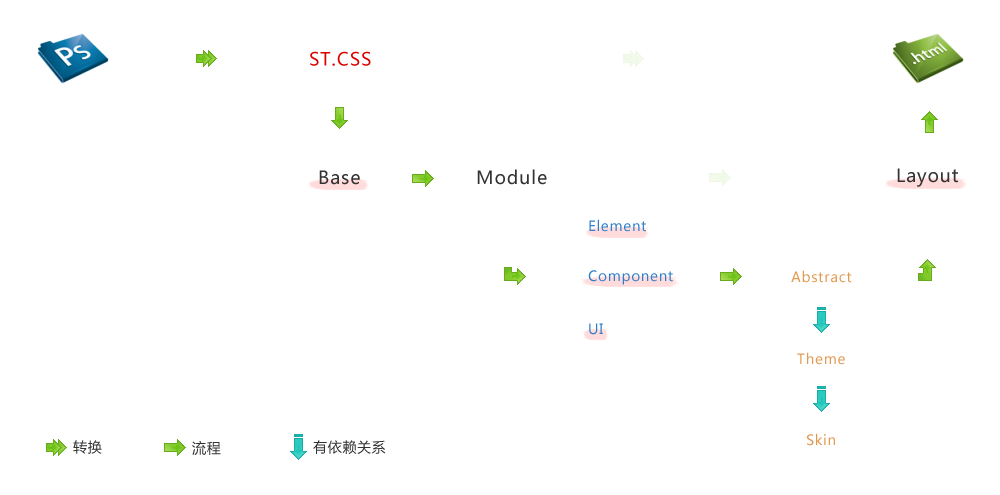
<style>
.page{position:relative;width:1000px;height:495px;background:#ffffff}
.page>*{position:absolute;margin:0}
.t1{font:18px "MicrosoftYaHei";letter-spacing:0.05em;color:#d90000}
.t2{font:18px "MicrosoftYaHei";letter-spacing:0.05em;color:#333333}
.t3{font:14px "MicrosoftYaHei";letter-spacing:0.05em;color:#2f7ec9}
.t4{font:14px "MicrosoftYaHei";letter-spacing:0.05em;color:#e39950}
.t5{font:14px "MicrosoftYaHei";letter-spacing:0.05em;color:#333333}
</style>
<div class="page">
<p class="t1" style="left:310px;top:51px;width:61px;height:15px">ST.CSS</p>
<p class="t2" style="left:319px;top:170px;width:41px;height:15px">Base</p>
<p class="t2" style="left:477px;top:169px;width:70px;height:16px">Module</p>
<p class="t2" style="left:897px;top:168px;width:61px;height:19px">Layout</p>
<p class="t3" style="left:589px;top:219px;width:57px;height:13px">Element</p>
<p class="t3" style="left:588px;top:270px;width:85px;height:15px">Component</p>
<p class="t4" style="left:791px;top:270px;width:61px;height:13px">Abstract</p>
<p class="t3" style="left:589px;top:323px;width:14px;height:12px">UI</p>
<p class="t4" style="left:797px;top:352px;width:48px;height:13px">Theme</p>
<p class="t4" style="left:807px;top:433px;width:28px;height:13px">Skin</p>
<p class="t5" style="left:73px;top:440px;width:29px;height:14px">转换</p>
<p class="t5" style="left:192px;top:441px;width:29px;height:14px">流程</p>
<p class="t5" style="left:313px;top:440px;width:73px;height:14px">有依赖关系</p>
</div>
